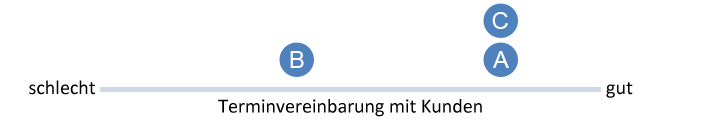
<style>
.page{position:relative;width:717px;height:120px;background:#ffffff}
.page>*{position:absolute;margin:0}
.t1{font:24px "ArialMT";color:#ffffff}
.t2{font:20px "Calibri";color:#000000}
</style>
<div class="page">
<p class="t1" style="left:492px;top:12px;width:16px;height:17px">C</p>
<p class="t1" style="left:290px;top:51px;width:14px;height:17px">B</p>
<p class="t1" style="left:493px;top:51px;width:16px;height:17px">A</p>
<p class="t2" style="left:29px;top:80px;width:66px;height:15px">schlecht</p>
<p class="t2" style="left:606px;top:82px;width:27px;height:16px">gut</p>
<p class="t2" style="left:218px;top:99px;width:264px;height:18px">Terminvereinbarung mit Kunden</p>
</div>
